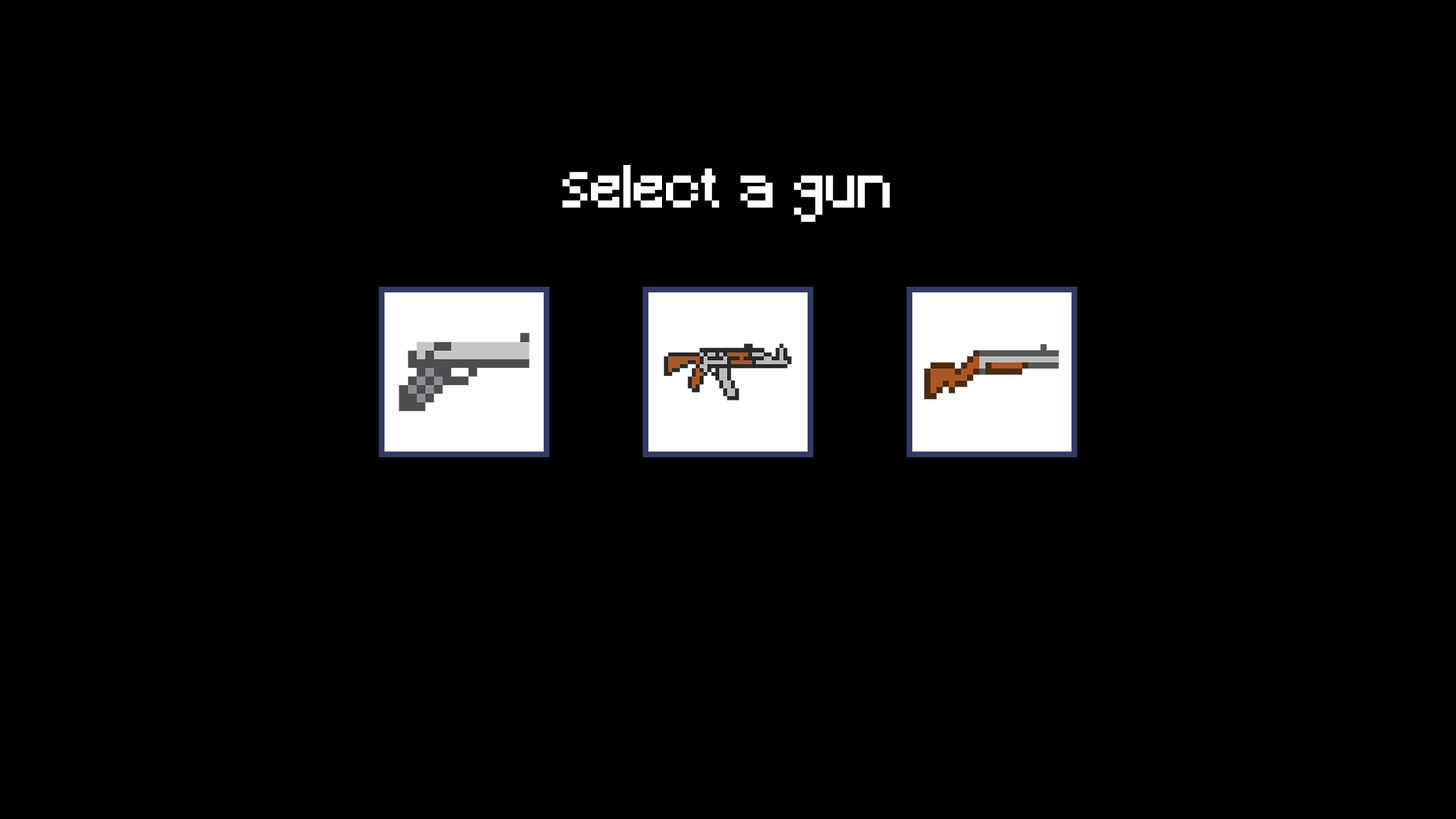
<style>
.page{position:relative;width:1456px;height:819px;background:#000000}
.page>*{position:absolute;margin:0}
.t1{font:56.9px "Minecraft";color:#ffffff}
</style>
<div class="page">
<p class="t1" style="left:562px;top:165px;width:328px;height:57px">select a gun</p>
</div>
